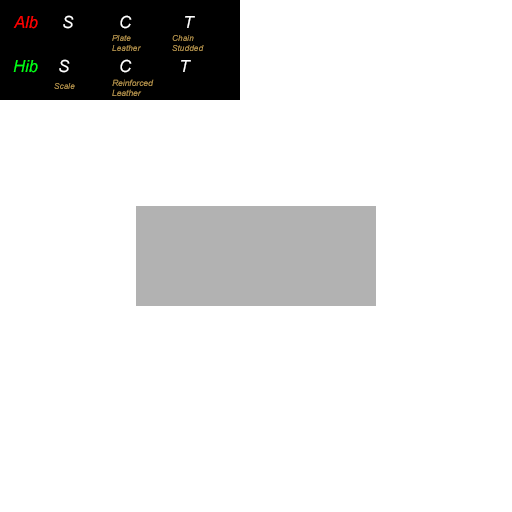
<style>
.page{position:relative;width:512px;height:512px;background:#ffffff}
.page>*{position:absolute;margin:0}
.t1{font:16.7px "Arial-ItalicMT";color:#ff0000}
.t2{font:16.7px "Arial-ItalicMT";color:#ffffff}
.t3{font:8.3px "Arial-ItalicMT";color:#be9b53}
.t4{font:16.7px "Arial-ItalicMT";color:#00ff18}
.t5{font:8.5px "Arial-ItalicMT";color:#be9b53}
</style>
<div class="page">
<p class="t1" style="left:13px;top:16px;width:25px;height:13px">Alb</p>
<p class="t2" style="left:63px;top:15px;width:11px;height:14px">S</p>
<p class="t2" style="left:120px;top:15px;width:12px;height:14px">C</p>
<p class="t2" style="left:185px;top:16px;width:10px;height:12px">T</p>
<p class="t3" style="left:112px;top:35px;width:29px;height:16px">Plate<br>Leather</p>
<p class="t3" style="left:172px;top:35px;width:32px;height:16px">Chain<br>Studded</p>
<p class="t4" style="left:13px;top:60px;width:25px;height:13px">Hib</p>
<p class="t2" style="left:59px;top:59px;width:11px;height:14px">S</p>
<p class="t2" style="left:120px;top:59px;width:12px;height:14px">C</p>
<p class="t2" style="left:181px;top:60px;width:10px;height:12px">T</p>
<p class="t3" style="left:54px;top:83px;width:21px;height:6px">Scale</p>
<p class="t5" style="left:112px;top:79px;width:42px;height:17px">Reinforced<br>Leather</p>
</div>
